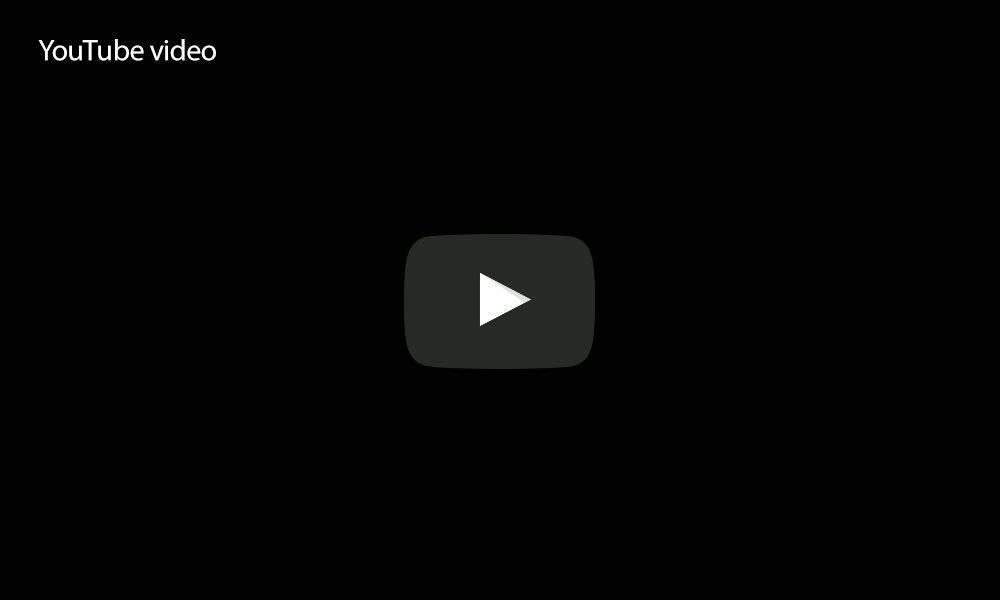
<style>
.page{position:relative;width:1000px;height:600px;background:#000000}
.page>*{position:absolute;margin:0}
.t1{font:30px "MyriadPro-Regular";letter-spacing:-0.015em;color:#ffffff}
</style>
<div class="page">
<p class="t1" style="left:38px;top:39px;width:178px;height:22px">YouTube video</p>
</div>
